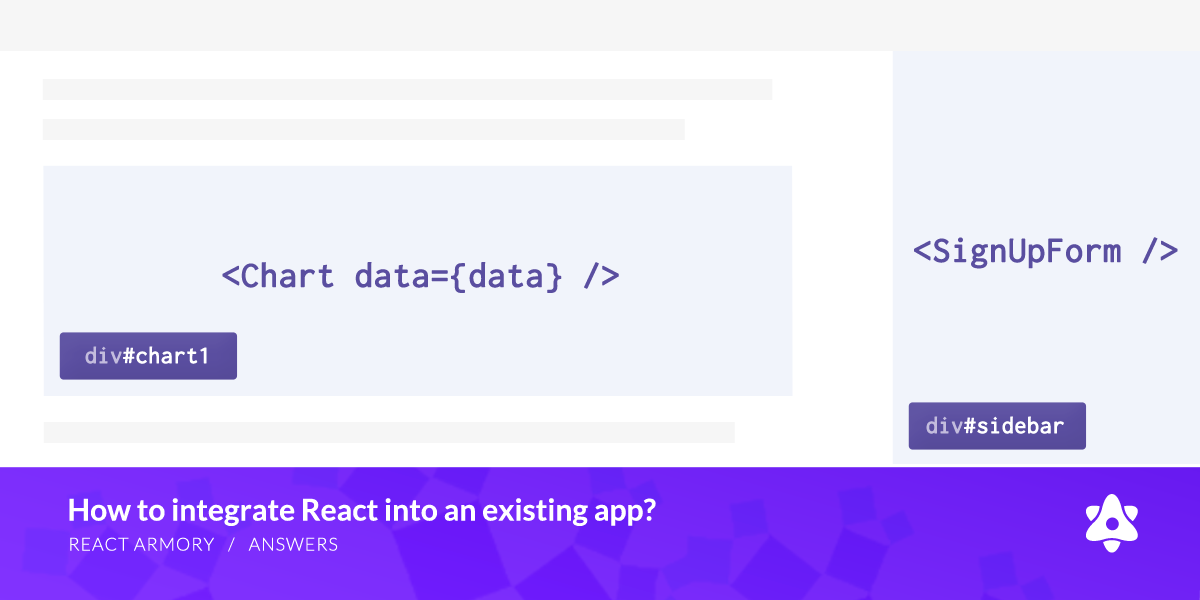
<style>
.page{position:relative;width:1200px;height:600px;background:#f1f4fb}
.page>*{position:absolute;margin:0}
.t1{font:36px "Inconsolata";color:#5a4ea0;font-weight:bold}
.t2{font:24px "Inconsolata";color:#ffffff;font-weight:bold}
.t3{font:24px "Inconsolata";color:#c3bcdd;font-weight:bold}
.t4{font:30px "Lato-Bold";color:#ffffff}
.t5{font:18px "Lato-Light";letter-spacing:0.05em;color:#ffffff}
</style>
<div class="page">
<p class="t1" style="left:914px;top:237px;width:264px;height:32px">&lt;SignUpForm /&gt;</p>
<p class="t1" style="left:222px;top:262px;width:397px;height:31px">&lt;Chart data={data} /&gt;</p>
<p class="t2" style="left:85px;top:346px;width:122px;height:18px"><span class="t3">div</span>#chart1</p>
<p class="t2" style="left:926px;top:416px;width:138px;height:18px"><span class="t3">div</span>#sidebar</p>
<p class="t4" style="left:69px;top:498px;width:587px;height:28px">How to integrate React into an existing app?</p>
<p class="t5" style="left:70px;top:537px;width:268px;height:15px">REACT ARMORY   /   ANSWERS</p>
</div>
